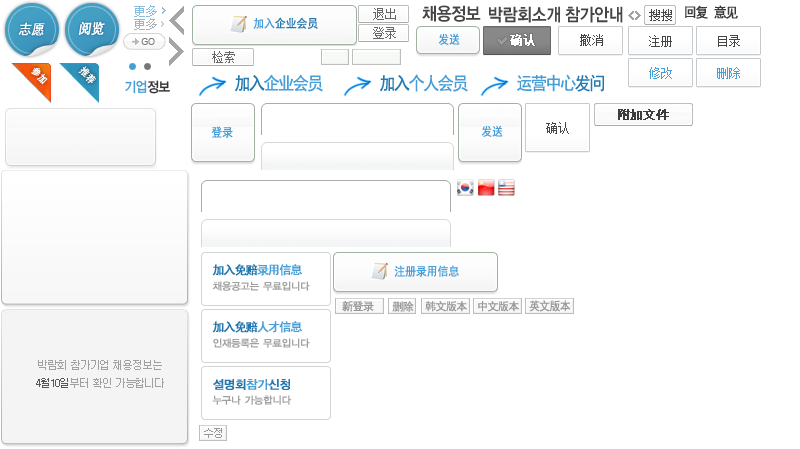
<style>
.page{position:relative;width:800px;height:449px;background:#ffffff}
.page>*{position:absolute;margin:0}
.t1{font:12px "SimSun";color:#89bde0}
.t2{font:18px "YDIYGO140-KSCpc-EUC-H";letter-spacing:-0.1em;color:#454545;scale:0.9 1}
.t3{font:14px "SimHei";letter-spacing:-0.1em;color:#3b3b3b;font-weight:bold;scale:0.9 1}
.t4{font:12px "SimHei";color:#2677ae;scale:0.9 1}
.t5{font:12px "SimHei";color:#469ed9;scale:0.9 1}
.t6{font:12px "SimSun";color:#666666}
.t7{font:12px "SimSun";color:#464646}
.t8{font:14px "SimHei";color:#ffffff;font-weight:bold;font-style:italic;scale:0.9 1}
.t9{font:12px "SimSun";color:#abb0b5}
.t10{font:12px "SimSun";color:#ffffff;font-weight:bold}
.t11{font:12px "SimSun";color:#454545}
.t12{font:10px "SimHei";letter-spacing:-0.05em;color:#ffffff;font-weight:bold;scale:0.9 1}
.t13{font:18px "SimHei";letter-spacing:-0.1em;color:#469ed9;scale:0.9 1}
.t14{font:18px "SimHei";letter-spacing:-0.1em;color:#2479b2;scale:0.9 1}
.t15{font:12px "SimSun";color:#469ed9}
.t16{font:14px "YDIYGO130-KSCpc-EUC-H";letter-spacing:-0.1em;color:#469ed9;scale:0.9 1}
.t17{font:14px "YDIYGO130-KSCpc-EUC-H";letter-spacing:-0.1em;color:#333333;scale:0.9 1}
.t18{font:12px "MicrosoftYaHei";color:#3e3c3e;font-weight:bold}
.t19{font:12px "SimHei";letter-spacing:-0.1em;color:#2476ad;font-weight:bold}
.t20{font:12px "SimHei";letter-spacing:-0.1em;color:#469ed9;font-weight:bold}
.t21{font:10px "YDIYGO130-KSCpc-EUC-H";letter-spacing:-0.1em;color:#a1a1a1;font-weight:bold}
.t22{font:11px "SimHei";letter-spacing:-0.05em;color:#969696}
.t23{font:12px "SimHei";letter-spacing:-0.05em;color:#969696;scale:0.9 1}
.t24{font:12px "YDIYGO130-KSCpc-EUC-H";letter-spacing:-0.1em;color:#2476ad;font-weight:bold}
.t25{font:12px "YDIYGO130-KSCpc-EUC-H";letter-spacing:-0.1em;color:#469ed9;font-weight:bold}
</style>
<div class="page">
<p class="t1" style="left:134px;top:5px;width:23px;height:12px">更多</p>
<p class="t2" style="left:422px;top:5px;width:59px;height:17px">채용정보</p>
<p class="t2" style="left:489px;top:6px;width:71px;height:17px">박람회소개</p>
<p class="t2" style="left:565px;top:6px;width:58px;height:17px">참가안내</p>
<p class="t3" style="left:685px;top:5px;width:23px;height:14px">回复</p>
<p class="t3" style="left:714px;top:5px;width:24px;height:14px">意见</p>
<p class="t4" style="left:253px;top:17px;width:65px;height:12px"><span class="t5">加入</span>企业会员</p>
<p class="t6" style="left:373px;top:8px;width:23px;height:12px">退出</p>
<p class="t7" style="left:649px;top:9px;width:23px;height:12px">搜搜</p>
<p class="t8" style="left:18px;top:22px;width:27px;height:14px">志愿</p>
<p class="t8" style="left:78px;top:21px;width:27px;height:15px">阅览</p>
<p class="t9" style="left:134px;top:18px;width:23px;height:12px">更多</p>
<p class="t6" style="left:373px;top:27px;width:23px;height:12px">登录</p>
<p class="t5" style="left:438px;top:33px;width:22px;height:12px">发送</p>
<p class="t10" style="left:510px;top:34px;width:25px;height:12px">确认</p>
<p class="t11" style="left:580px;top:34px;width:23px;height:12px">撤消</p>
<p class="t11" style="left:649px;top:35px;width:23px;height:12px">注册</p>
<p class="t11" style="left:718px;top:35px;width:22px;height:12px">目录</p>
<p class="t6" style="left:212px;top:51px;width:23px;height:12px">检索</p>
<p class="t12" style="left:31px;top:67px;width:17px;height:18px;rotate:45deg">参加</p>
<p class="t12" style="left:78px;top:66px;width:18px;height:18px;rotate:45deg">推荐</p>
<p class="t13" style="left:235px;top:74px;width:88px;height:18px"><span class="t14">加入</span>企业会员</p>
<p class="t13" style="left:380px;top:74px;width:88px;height:18px"><span class="t14">加入</span>个人会员</p>
<p class="t13" style="left:517px;top:74px;width:87px;height:18px">运营中心<span class="t14">发问</span></p>
<p class="t15" style="left:649px;top:67px;width:23px;height:12px">修改</p>
<p class="t15" style="left:717px;top:67px;width:23px;height:12px">删除</p>
<p class="t16" style="left:125px;top:80px;width:45px;height:14px">기업<span class="t17">정보</span></p>
<p class="t18" style="left:618px;top:109px;width:51px;height:11px">附加文件</p>
<p class="t5" style="left:211px;top:126px;width:22px;height:12px">登录</p>
<p class="t5" style="left:481px;top:125px;width:22px;height:12px">发送</p>
<p class="t11" style="left:546px;top:122px;width:23px;height:12px">确认</p>
<p class="t19" style="left:212px;top:264px;width:90px;height:12px">加入免赔<span class="t20">录用信息</span></p>
<p class="t5" style="left:394px;top:265px;width:65px;height:12px">注册录用信息</p>
<p class="t21" style="left:212px;top:281px;width:98px;height:10px">채용공고는 무료입니다</p>
<p class="t22" style="left:342px;top:301px;width:32px;height:11px">新登录</p>
<p class="t22" style="left:392px;top:301px;width:22px;height:11px">删除</p>
<p class="t22" style="left:425px;top:301px;width:42px;height:11px">韩文版本</p>
<p class="t22" style="left:478px;top:301px;width:41px;height:11px">中文版本</p>
<p class="t23" style="left:529px;top:300px;width:42px;height:12px">英文版本</p>
<p class="t19" style="left:212px;top:321px;width:90px;height:12px">加入免赔<span class="t20">人才信息</span></p>
<p class="t21" style="left:213px;top:338px;width:97px;height:10px">인재등록은 무료입니다</p>
<p class="t24" style="left:213px;top:379px;width:77px;height:11px">설명회<span class="t25">참가</span>신청</p>
<p class="t21" style="left:212px;top:395px;width:79px;height:10px">누구나 가능합니다</p>
</div>
